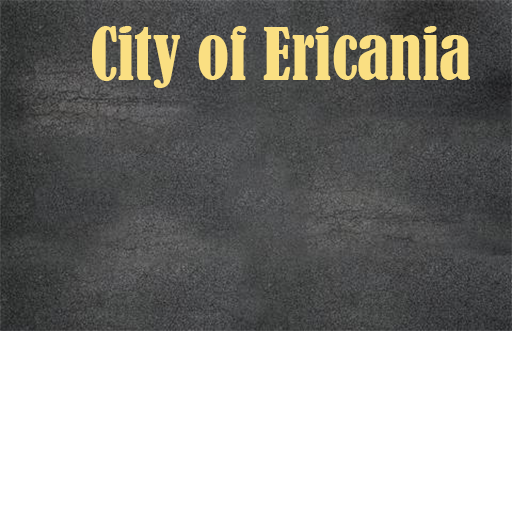
<style>
.page{position:relative;width:512px;height:512px;background:#ffffff}
.page>*{position:absolute;margin:0}
.t1{font:66.7px "BernardMT-Condensed";color:#fadf82}
.t2{font:66.7px "BernardMT-Condensed";color:#d01818}
</style>
<div class="page">
<p class="t1" style="left:92px;top:26px;width:378px;height:62px"><span class="t2"> </span>City of Ericania</p>
</div>
